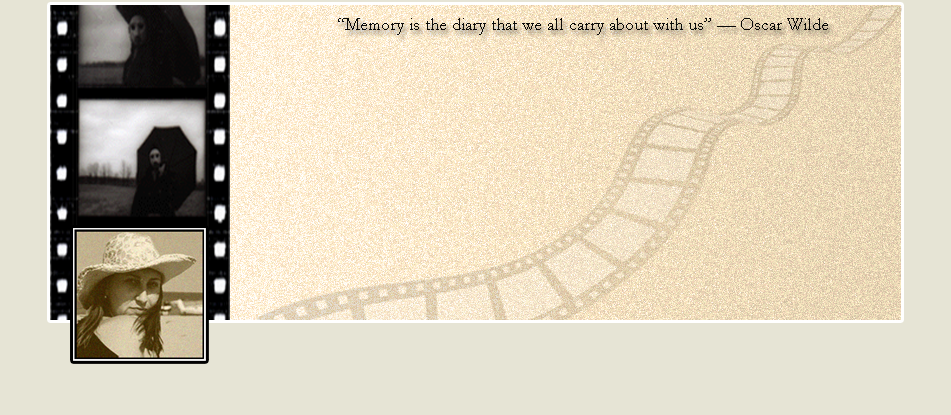
<style>
.page{position:relative;width:951px;height:415px;background:#e6e4d5}
.page>*{position:absolute;margin:0}
.t1{font:18px "Garamond";color:#0b0b0a}
</style>
<div class="page">
<p class="t1" style="left:338px;top:18px;width:490px;height:17px">“Memory is the diary that we all carry about with us” — Oscar Wilde</p>
</div>
